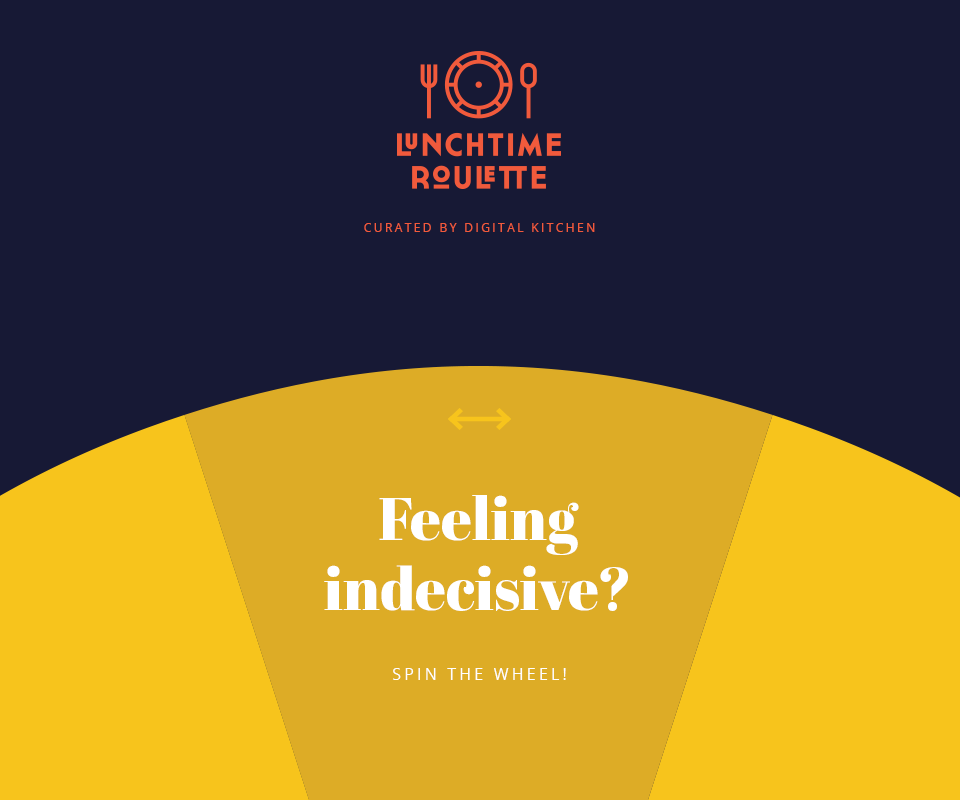
<style>
.page{position:relative;width:960px;height:800px;background:#171935}
.page>*{position:absolute;margin:0}
.t1{font:12px "OpenSans";letter-spacing:0.2em;color:#f15a3c;text-transform:uppercase}
.t2{font:60px/70px "AbrilFatface-Regular";color:#ffffff}
.t3{font:16px "OpenSans";letter-spacing:0.2em;color:#ffffff;text-transform:uppercase}
</style>
<div class="page">
<p class="t1" style="left:364px;top:223px;width:231px;height:9px">curated by digital kitchen</p>
<p class="t1" style="left:364px;top:223px;width:231px;height:9px">curated by digital kitchen</p>
<p class="t2" style="left:324px;top:495px;width:304px;height:116px;text-align:center">Feeling<br>indecisive?</p>
<p class="t3" style="left:393px;top:668px;width:173px;height:12px">spin the wheel!</p>
</div>
